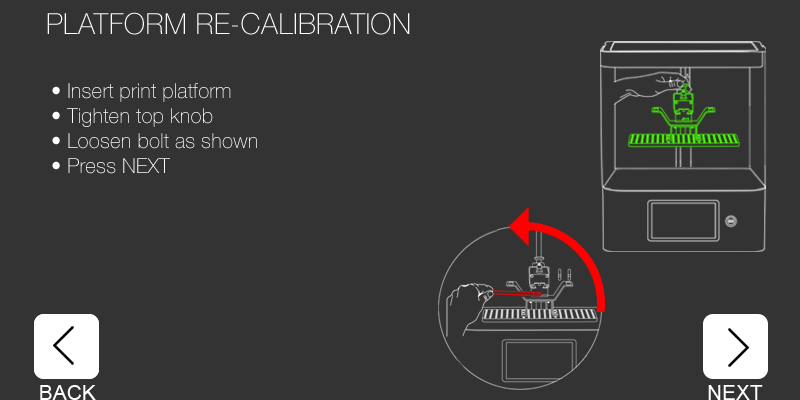
<style>
.page{position:relative;width:800px;height:400px;background:#333333}
.page>*{position:absolute;margin:0}
.t1{font:20.8px "HelveticaNeue-Thin";color:#ffffff}
</style>
<div class="page">
<p class="t1" style="left:52px;top:83px;width:205px;height:91px">• Insert print platform<br>• Tighten top knob<br>• Loosen bolt as shown<br>• Press NEXT</p>
</div>
